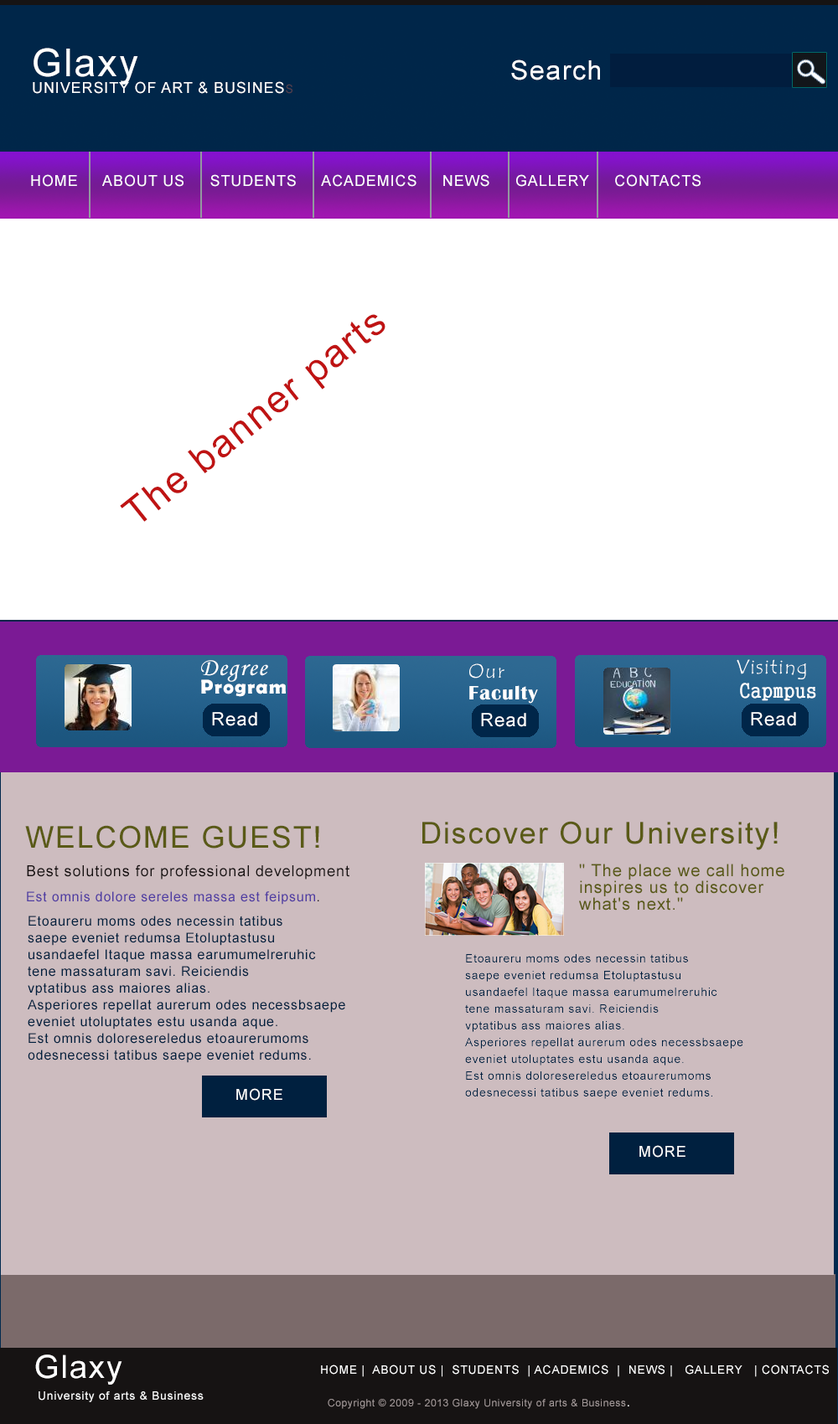
<style>
.page{position:relative;width:838px;height:1424px;background:#ffffff}
.page>*{position:absolute;margin:0}
.t1{font:15.1px/16.8px "ArialMT";letter-spacing:0.05em;color:#ffffff}
.t2{font:38.5px/16.8px "ArialMT";letter-spacing:0.05em;color:#ffffff}
.t3{font:11.7px/16.8px "ArialMT";letter-spacing:0.05em;color:#53404c}
.t4{font:26.8px "ArialMT";letter-spacing:0.05em;color:#fefeff}
.t5{font:15.1px "ArialMT";letter-spacing:0.05em;color:#ffffff}
.t6{font:38.5px "ArialMT";letter-spacing:0.05em;color:#bf1313}
.t7{font:25.1px "MonotypeCorsiva";letter-spacing:0.05em;color:#ffffff}
.t8{font:20.1px "TempusSansITC";letter-spacing:0.05em;color:#ffffff}
.t9{font:20.1px "BerlinSansFBDemi-Bold";letter-spacing:0.05em;color:#ffffff}
.t10{font:20.1px "BritannicBold";letter-spacing:0.05em;color:#ffffff}
.t11{font:20.1px "GungsuhChe";letter-spacing:0.05em;color:#ffffff}
.t12{font:18.4px "ArialMT";letter-spacing:0.05em;color:#ffffff}
.t13{font:30.2px "ArialMT";letter-spacing:0.05em;color:#5a5a17}
.t14{font:15.1px "ArialMT";letter-spacing:0.05em;color:#171111}
.t15{font:16.8px/16.8px "ArialMT";letter-spacing:0.05em;color:#5a5a17}
.t16{font:13.4px "ArialMT";letter-spacing:0.05em;color:#4f3ca2}
.t17{font:13.4px/16.8px "ArialMT";letter-spacing:0.05em;color:#00203f}
.t18{font:31.8px "ArialMT";letter-spacing:0.05em;color:#ffffff}
.t19{font:11.7px "ArialMT";letter-spacing:0.05em;color:#ffffff}
.t20{font:10.1px "ArialMT";letter-spacing:0.05em;color:#a29898}
</style>
<div class="page">
<p class="t1" style="left:33px;top:48px;width:259px;height:46px"><span class="t2">Glaxy<br></span>UNIVERSITY OF ART &amp; BUSINES<span class="t3">S</span></p>
<p class="t4" style="left:511px;top:59px;width:89px;height:21px">Search</p>
<p class="t5" style="left:31px;top:174px;width:669px;height:13px">HOME     ABOUT US     STUDENTS     ACADEMICS     NEWS     GALLERY     CONTACTS</p>
<p class="t6" style="left:120px;top:314px;width:265px;height:208px;rotate:-39deg">The banner parts</p>
<p class="t7" style="left:201px;top:660px;width:67px;height:22px">Degree</p>
<p class="t8" style="left:469px;top:663px;width:35px;height:15px">Our</p>
<p class="t8" style="left:736px;top:659px;width:70px;height:20px">Visiting</p>
<p class="t9" style="left:201px;top:679px;width:85px;height:18px">Program</p>
<p class="t10" style="left:469px;top:685px;width:69px;height:19px">Faculty</p>
<p class="t11" style="left:740px;top:683px;width:76px;height:18px">Capmpus</p>
<p class="t12" style="left:212px;top:712px;width:45px;height:14px">Read</p>
<p class="t12" style="left:212px;top:712px;width:45px;height:14px">Read</p>
<p class="t12" style="left:481px;top:713px;width:45px;height:14px">Read</p>
<p class="t12" style="left:750px;top:712px;width:46px;height:14px">Read</p>
<p class="t13" style="left:422px;top:821px;width:355px;height:29px">Discover Our University!</p>
<p class="t13" style="left:25px;top:825px;width:294px;height:23px">WELCOME GUEST!</p>
<p class="t14" style="left:27px;top:864px;width:322px;height:15px">Best solutions for professional development</p>
<p class="t15" style="left:579px;top:863px;width:205px;height:47px">" The place we call home <br>inspires us to discover <br>what's next."</p>
<p class="t16" style="left:27px;top:891px;width:292px;height:14px">Est omnis dolore sereles massa est feipsum<span class="t14">.</span></p>
<p class="t17" style="left:28px;top:915px;width:317px;height:148px">Etoaureru moms odes necessin tatibus <br>saepe eveniet redumsa Etoluptastusu <br>usandaefel Itaque massa earumumelreruhic <br>tene massaturam savi. Reiciendis <br>vptatibus ass maiores alias.<br>Asperiores repellat aurerum odes necessbsaepe <br>eveniet utoluptates estu usanda aque. <br>Est omnis doloresereledus etoaurerumoms <br>odesnecessi tatibus saepe eveniet redums.</p>
<p class="t5" style="left:236px;top:1088px;width:46px;height:12px">MORE</p>
<p class="t5" style="left:639px;top:1145px;width:46px;height:12px">MORE</p>
<p class="t18" style="left:35px;top:1354px;width:87px;height:30px">Glaxy</p>
<p class="t19" style="left:321px;top:1364px;width:507px;height:13px">HOME |  ABOUT US |  STUDENTS  | ACADEMICS  |  NEWS |   GALLERY   | CONTACTS</p>
<p class="t19" style="left:39px;top:1391px;width:165px;height:11px">University of arts &amp; Business</p>
<p class="t20" style="left:327px;top:1399px;width:302px;height:10px">Copyright © 2009 - 2013 Glaxy University of arts &amp; Business<span class="t5">.</span></p>
</div>
